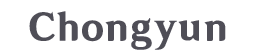
<style>
.page{position:relative;width:256px;height:56px;background:#ffffff}
.page>*{position:absolute;margin:0}
.t1{font:36px "HYWenHei-HEW";color:#4f4e57}
</style>
<div class="page">
<p class="t1" style="left:29px;top:11px;width:197px;height:39px">Chongyun</p>
</div>
